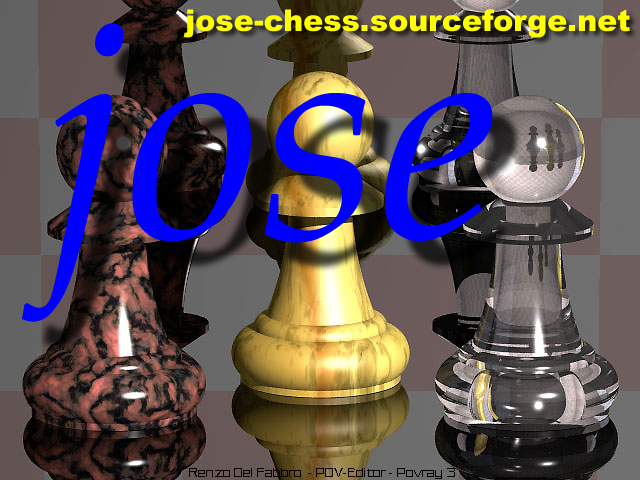
<style>
.page{position:relative;width:640px;height:480px}
.page>*{position:absolute;margin:0}
.t1{font:30px "Arial-Black";color:#ffff00}
.t2{font:303.7px "PalatinoLinotype-Italic";color:#0000ff}
</style>
<div class="page">
<p class="t1" style="left:183px;top:9px;width:447px;height:29px">jose-chess.sourceforge.net</p>
<p class="t2" style="left:22px;top:23px;width:471px;height:299px">jose</p>
</div>
